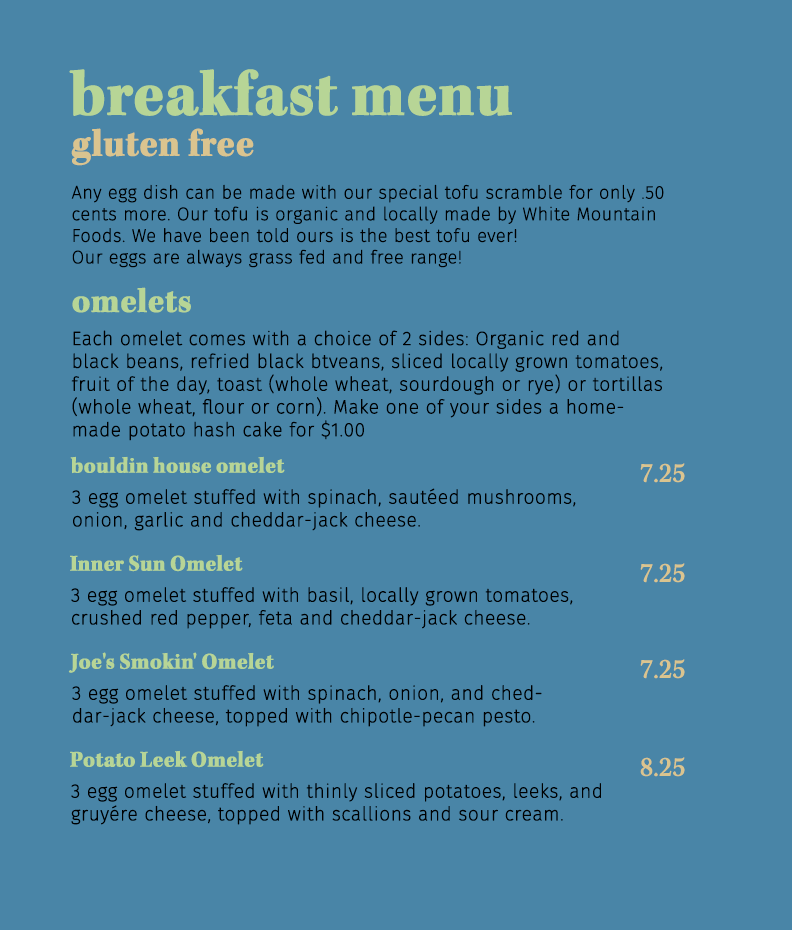
<style>
.page{position:relative;width:792px;height:930px;background:#4985a7}
.page>*{position:absolute;margin:0}
.t1{font:64px "KeplerStd-BoldDisp";letter-spacing:0.01em;color:#b7d596;font-weight:bold}
.t2{font:38px "KeplerStd-BoldDisp";letter-spacing:0.01em;color:#dac48f;font-weight:bold}
.t3{font:18px "FiraSans-UltraLight";letter-spacing:0.01em;color:#000000;font-weight:bold}
.t4{font:19px "KeplerStd-BoldDisp";letter-spacing:0.01em;color:#000000;font-weight:bold}
.t5{font:34px "KeplerStd-BoldDisp";letter-spacing:0.01em;color:#b7d596;font-weight:bold}
.t6{font:19px "FiraSans-UltraLight";letter-spacing:0.01em;color:#000000;font-weight:bold}
.t7{font:22px "KeplerStd-BoldDisp";letter-spacing:0.01em;color:#b7d596;font-weight:bold}
.t8{font:30px "KeplerStd-BoldDisp";letter-spacing:0.01em;color:#000000;font-weight:bold}
.t9{font:27px "KeplerStd-Disp";letter-spacing:0.01em;color:#dac48f;font-weight:bold}
</style>
<div class="page">
<p class="t1" style="left:69px;top:69px;width:443px;height:47px">breakfast menu</p>
<p class="t2" style="left:71px;top:128px;width:183px;height:38px">gluten free</p>
<p class="t3" style="left:71px;top:184px;width:593px;height:84px">Any egg dish can be made with our special tofu scramble for only .50 cents more. Our tofu is organic and locally made by White Mountain Foods. We have been told ours is the best tofu ever!<br>Our eggs are always grass fed and free range!<br><span class="t4"><br>v</span></p>
<p class="t5" style="left:72px;top:287px;width:119px;height:26px">omelets</p>
<p class="t6" style="left:71px;top:330px;width:592px;height:111px">Each omelet comes with a choice of 2 sides: Organic red and black beans, refried black btveans, sliced locally grown tomatoes, fruit of the day, toast (whole wheat, sourdough or rye) or tortillas (whole wheat, flour or corn). Make one of your sides a homemade potato hash cake for $1.00</p>
<p class="t7" style="left:70px;top:456px;width:215px;height:18px"><span class="t8"><br></span>bouldin house omelet</p>
<p class="t9" style="left:640px;top:463px;width:45px;height:20px">7.25</p>
<p class="t6" style="left:72px;top:488px;width:504px;height:43px">3 egg omelet stuffed with spinach, sautéed mushrooms, onion, garlic and cheddar-jack cheese.</p>
<p class="t7" style="left:70px;top:554px;width:173px;height:18px"><span class="t8"><br></span>Inner Sun Omelet</p>
<p class="t9" style="left:640px;top:563px;width:45px;height:20px">7.25</p>
<p class="t6" style="left:71px;top:587px;width:502px;height:42px">3 egg omelet stuffed with basil, locally grown tomatoes, crushed red pepper, feta and cheddar-jack cheese.</p>
<p class="t7" style="left:68px;top:652px;width:206px;height:21px"><span class="t8"><br></span>Joe's Smokin' Omelet</p>
<p class="t9" style="left:640px;top:659px;width:45px;height:20px">7.25</p>
<p class="t6" style="left:72px;top:685px;width:470px;height:42px">3 egg omelet stuffed with spinach, onion, and cheddar-jack cheese, topped with chipotle-pecan pesto.</p>
<p class="t7" style="left:70px;top:750px;width:194px;height:18px"><span class="t8"><br></span>Potato Leek Omelet</p>
<p class="t9" style="left:640px;top:757px;width:45px;height:20px">8.25</p>
<p class="t6" style="left:71px;top:783px;width:530px;height:42px">3 egg omelet stuffed with thinly sliced potatoes, leeks, and gruyére cheese, topped with scallions and sour cream.</p>
</div>
